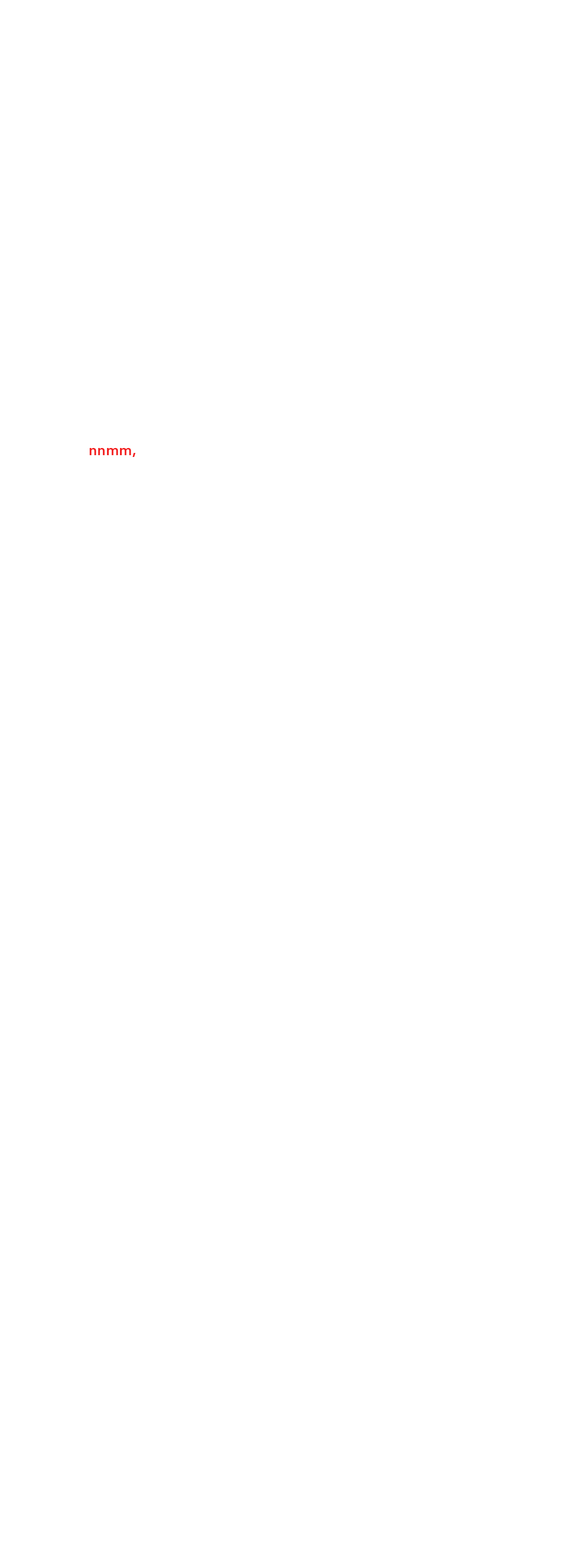
<style>
.page{position:relative;width:573px;height:1568px;background:#ffffff}
.page>*{position:absolute;margin:0}
.t1{font:14.9px "Avenir-Heavy";color:#f31f1f}
</style>
<div class="page">
<p class="t1" style="left:90px;top:448px;width:46px;height:9px">nnmm,</p>
</div>
